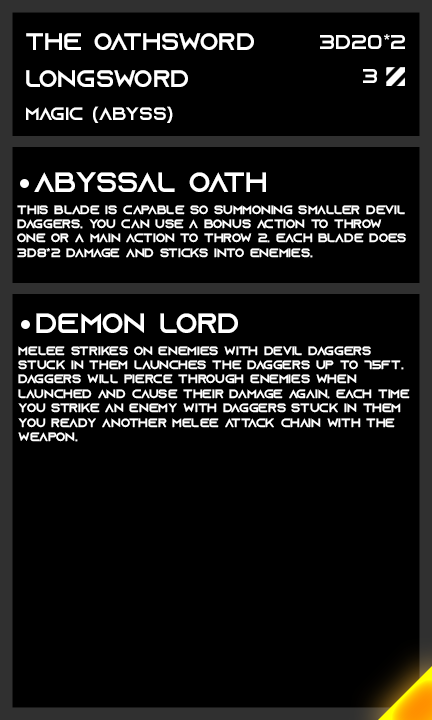
<style>
.page{position:relative;width:432px;height:720px;background:#000000}
.page>*{position:absolute;margin:0}
.t1{font:24px "AzonixRegular";color:#ffffff}
.t2{font:20px "AzonixRegular";color:#ffffff}
.t3{font:18px "AzonixRegular";color:#ffffff}
.t4{font:28px "AzonixRegular";color:#ffffff}
.t5{font:12px "AzonixRegular";color:#ffffff}
</style>
<div class="page">
<p class="t1" style="left:26px;top:33px;width:228px;height:17px">the oathsword</p>
<p class="t2" style="left:320px;top:34px;width:85px;height:15px">3d20*2</p>
<p class="t1" style="left:26px;top:70px;width:162px;height:17px">longsword</p>
<p class="t2" style="left:363px;top:69px;width:14px;height:14px">3</p>
<p class="t3" style="left:26px;top:106px;width:147px;height:17px">magic (abyss)</p>
<p class="t4" style="left:34px;top:172px;width:232px;height:20px">abyssal oath</p>
<p class="t5" style="left:17px;top:205px;width:389px;height:53px">this blade is capable so summoning smaller devil<br>daggers. you can use a bonus action to throw <br>one or a main action to throw 2. each blade does<br>3d8*2 damage and sticks into enemies.</p>
<p class="t4" style="left:36px;top:313px;width:202px;height:20px">demon lord</p>
<p class="t5" style="left:18px;top:346px;width:392px;height:96px">melee strikes on enemies with devil daggers <br>stuck in them launches the daggers up to 75ft.<br>daggers will pierce through enemies when <br>launched and cause their damage again. each time<br>you strike an enemy with daggers stuck in them<br>you ready another melee attack chain with the<br>weapon.</p>
</div>
